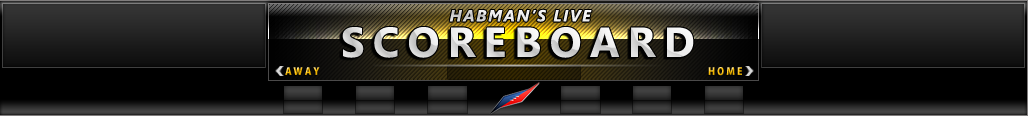
<style>
.page{position:relative;width:1028px;height:116px}
.page>*{position:absolute;margin:0}
.t1{font:16px "SegoeUI-BoldItalic";letter-spacing:0.1em}
.t2{font:42px "SegoeUI-Bold";letter-spacing:0.2em;color:#e4e4e4}
.t3{font:10px "KozGoPro-Heavy";letter-spacing:0.2em}
</style>
<div class="page">
<p class="t1" style="left:449px;top:9px;width:143px;height:13px">HABMAN’S LIVE</p>
<p class="t1" style="left:449px;top:9px;width:143px;height:13px">HABMAN’S LIVE</p>
<p class="t2" style="left:342px;top:27px;width:352px;height:31px">SCOREBOARD</p>
<p class="t2" style="left:342px;top:27px;width:352px;height:31px">SCOREBOARD</p>
<p class="t3" style="left:285px;top:67px;width:35px;height:8px">AWAY</p>
<p class="t3" style="left:708px;top:67px;width:34px;height:9px">HOME</p>
</div>
